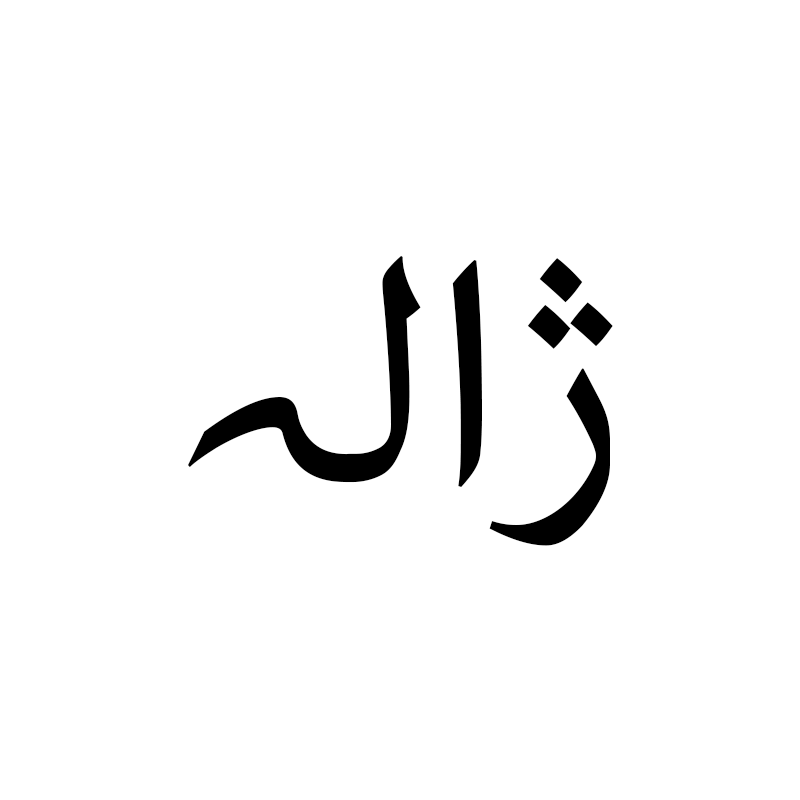
<style>
.page{position:relative;width:800px;height:800px;background:#ffffff}
.page>*{position:absolute;margin:0}
.t1{font:450px "AdobeArabic-Regular";color:#000000}
</style>
<div class="page">
<p class="t1" style="left:188px;top:255px;width:425px;height:291px">ژالہ</p>
</div>
